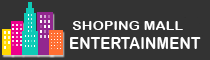
<style>
.page{position:relative;width:210px;height:60px;background:#333333}
.page>*{position:absolute;margin:0}
.t1{font:12.8px "ArialRoundedMTBold";color:#ffffff;scale:1.11 1}
.t2{font:16.6px "ArialRoundedMTBold";color:#ffffff;scale:0.92 1}
</style>
<div class="page">
<p class="t1" style="left:72px;top:21px;width:111px;height:9px">SHOPING MALL</p>
<p class="t2" style="left:70px;top:37px;width:131px;height:12px">ENTERTAINMENT</p>
</div>
